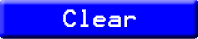
<style>
.page{position:relative;width:198px;height:39px;background:#0000ff}
.page>*{position:absolute;margin:0}
.t1{font:20px "Terminal";color:#ffffff}
</style>
<div class="page">
<p class="t1" style="left:63px;top:9px;width:73px;height:18px">Clear</p>
</div>
